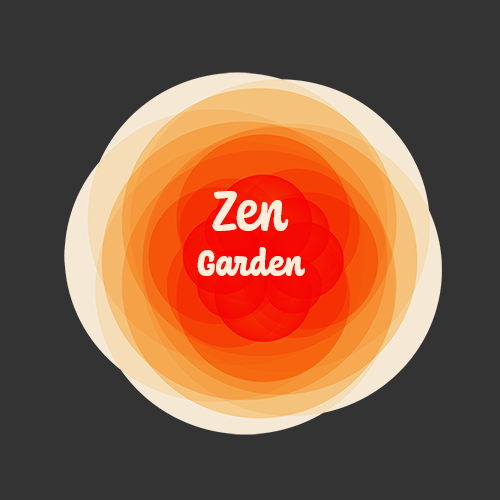
<style>
.page{position:relative;width:500px;height:500px;background:#333333}
.page>*{position:absolute;margin:0}
.t1{font:60px "Coniferous-Bold";color:#fdedd9}
.t2{font:38.4px "Coniferous-Black";color:#fdedd9}
</style>
<div class="page">
<p class="t1" style="left:212px;top:191px;width:77px;height:40px">Zen</p>
<p class="t2" style="left:197px;top:247px;width:108px;height:29px">Garden</p>
</div>
